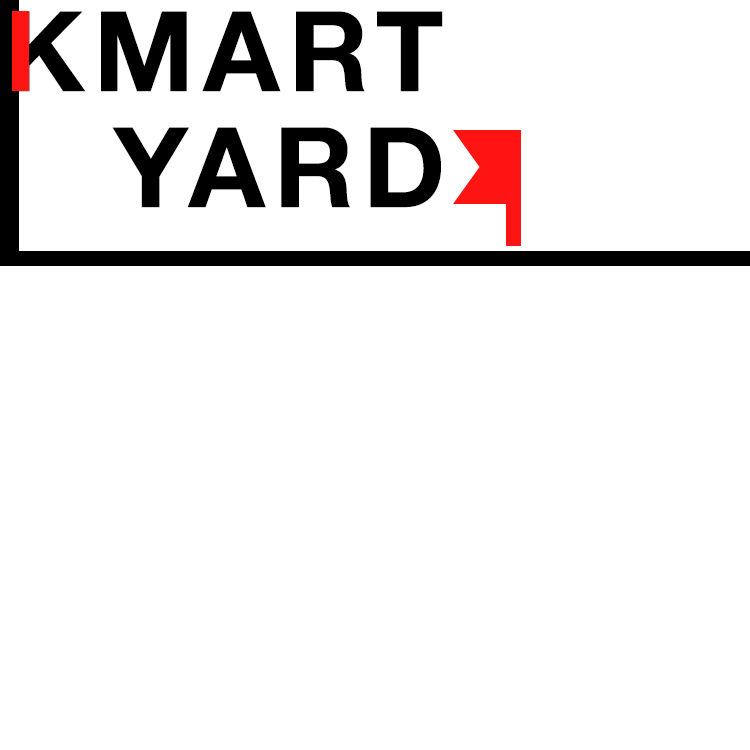
<style>
.page{position:relative;width:750px;height:750px;background:#ffffff}
.page>*{position:absolute;margin:0}
.t1{font:111.3px "HelveticaNeue-Bold";letter-spacing:0.08em;color:#000000}
</style>
<div class="page">
<p class="t1" style="left:11px;top:11px;width:432px;height:81px">KMART</p>
<p class="t1" style="left:112px;top:127px;width:329px;height:81px">YARD</p>
</div>
